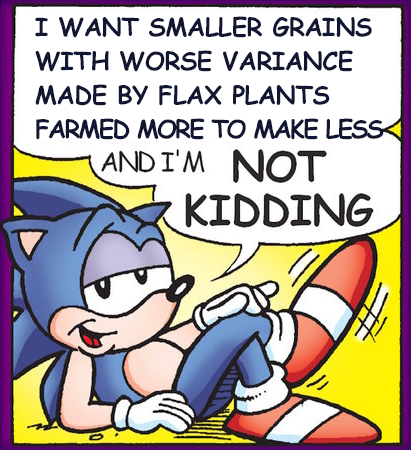
<style>
.page{position:relative;width:411px;height:450px;background:#ffffff}
.page>*{position:absolute;margin:0}
.t1{font:25px/34px "ComicSansMS-Bold";letter-spacing:-0.02em;color:#111633}
.t2{font:25px/34px "ComicSansMS-Bold";letter-spacing:-0.08em;color:#111633}
</style>
<div class="page">
<p class="t1" style="left:35px;top:16px;width:349px;height:124px">I WANT SMALLER GRAINS WITH WORSE VARIANCE MADE BY FLAX PLANTS <span class="t2">FARMED MORE TO MAKE LESS</span></p>
</div>
